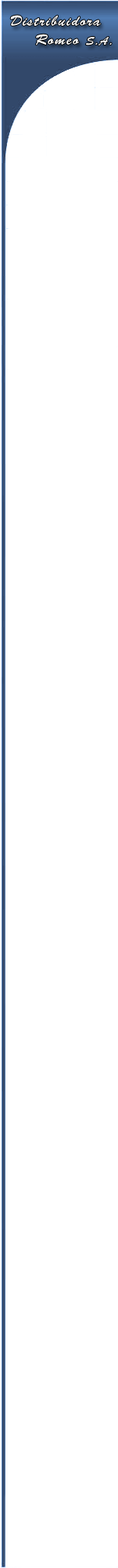
<style>
.page{position:relative;width:118px;height:1568px;background:#ffffff}
.page>*{position:absolute;margin:0}
.t1{font:14.7px "BrushScriptStd";letter-spacing:0.08em;color:#ffffff}
.t2{font:11.4px "BrushScriptStd";letter-spacing:0.08em;color:#ffffff}
</style>
<div class="page">
<p class="t1" style="left:10px;top:15px;width:91px;height:11px">Distribuidora</p>
<p class="t1" style="left:36px;top:34px;width:44px;height:11px">Romeo</p>
<p class="t2" style="left:86px;top:37px;width:26px;height:8px">S.A.</p>
</div>
